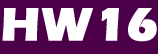
<style>
.page{position:relative;width:158px;height:54px;background:#4b0049}
.page>*{position:absolute;margin:0}
.t1{font:48px "ErasITC-Bold";color:#ffffff;font-weight:bold}
</style>
<div class="page">
<p class="t1" style="left:2px;top:8px;width:155px;height:34px">HW16</p>
</div>
